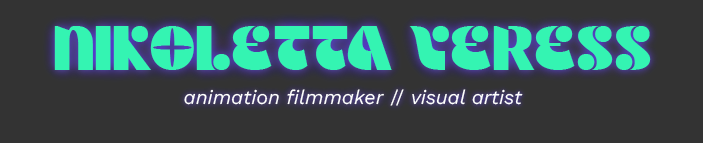
<style>
.page{position:relative;width:703px;height:143px;background:#333333}
.page>*{position:absolute;margin:0}
.t1{font:62.5px "ATNOMBRA-DEMO";color:#34f4b2}
.t2{font:19.8px "WorkSans-Italic";color:#ffffff}
.t3{font:19.8px "WorkSans-Regular";color:#ffffff}
</style>
<div class="page">
<p class="t1" style="left:54px;top:26px;width:597px;height:44px">NIKOLETTA VERESS</p>
<p class="t2" style="left:184px;top:89px;width:339px;height:17px">animation filmmaker<span class="t3"> // </span>visual artist</p>
</div>
